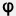
<style>
.page{position:relative;width:16px;height:16px;background:#f0f0f0}
.page>*{position:absolute;margin:0}
.t1{font:18px "ArialMT";color:#000000}
</style>
<div class="page">
<p class="t1" style="left:2px;top:2px;width:12px;height:14px">φ</p>
</div>
